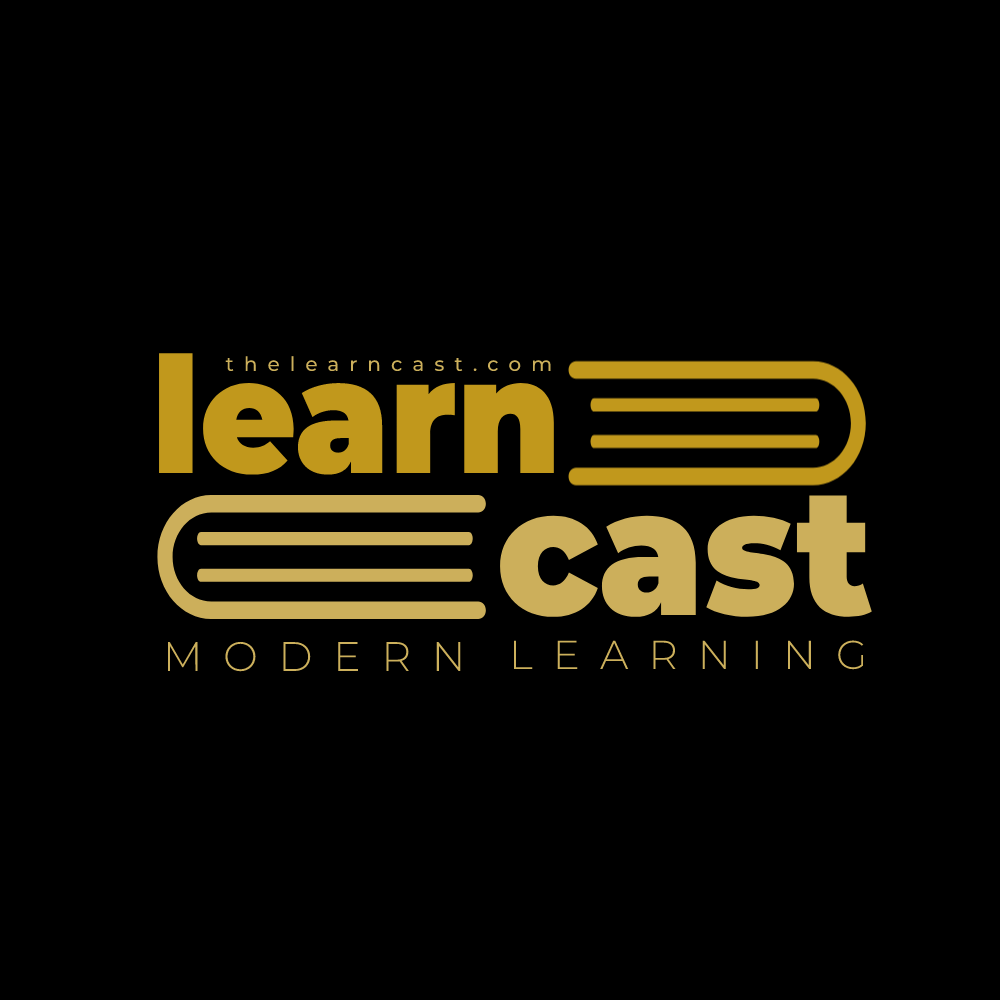
<style>
.page{position:relative;width:1000px;height:1000px;background:#000000}
.page>*{position:absolute;margin:0}
.t1{font:161.5px "Montserrat-Black";color:#c1981c;scale:0.92 1}
.t2{font:20px "Montserrat-Medium";letter-spacing:0.5em;color:#ccb05c}
.t3{font:178.3px "Montserrat-Black";color:#ccaf5b;scale:0.93 1}
.t4{font:41.3px "Montserrat-Light";letter-spacing:0.5em;color:#ccb05c}
.t5{font:40.4px "Montserrat-Light";letter-spacing:0.5em;color:#ccb05c}
</style>
<div class="page">
<p class="t1" style="left:159px;top:353px;width:395px;height:122px">learn</p>
<p class="t2" style="left:225px;top:356px;width:326px;height:16px">thelearncast.com</p>
<p class="t3" style="left:500px;top:495px;width:372px;height:122px">cast</p>
<p class="t4" style="left:168px;top:641px;width:293px;height:31px">MODERN</p>
<p class="t5" style="left:513px;top:640px;width:351px;height:30px">LEARNING</p>
</div>
